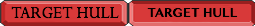
<style>
.page{position:relative;width:255px;height:26px;background:#d83939}
.page>*{position:absolute;margin:0}
.t1{font:18px "Perpetua";color:#000000}
.t2{font:12px "MyanmarMN-Bold";color:#000000}
</style>
<div class="page">
<p class="t1" style="left:11px;top:6px;width:108px;height:13px">TARGET HULL</p>
<p class="t2" style="left:147px;top:7px;width:91px;height:11px">TARGET HULL</p>
</div>
